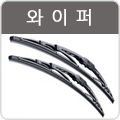
<style>
.page{position:relative;width:120px;height:120px;background:#ffffff}
.page>*{position:absolute;margin:0}
.t1{font:18px "NanumGothic";letter-spacing:0.05em;color:#ffffff;font-weight:bold}
</style>
<div class="page">
<p class="t1" style="left:26px;top:9px;width:65px;height:17px">와 이 퍼</p>
</div>
